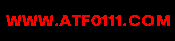
<style>
.page{position:relative;width:175px;height:41px;background:#000000}
.page>*{position:absolute;margin:0}
.t1{font:15.2px "Kalameh-ExtraBold";letter-spacing:0.01em;color:#ff0000;scale:1.12 1}
</style>
<div class="page">
<p class="t1" style="left:6px;top:15px;width:164px;height:11px">WWW.ATF0111.COM</p>
</div>
